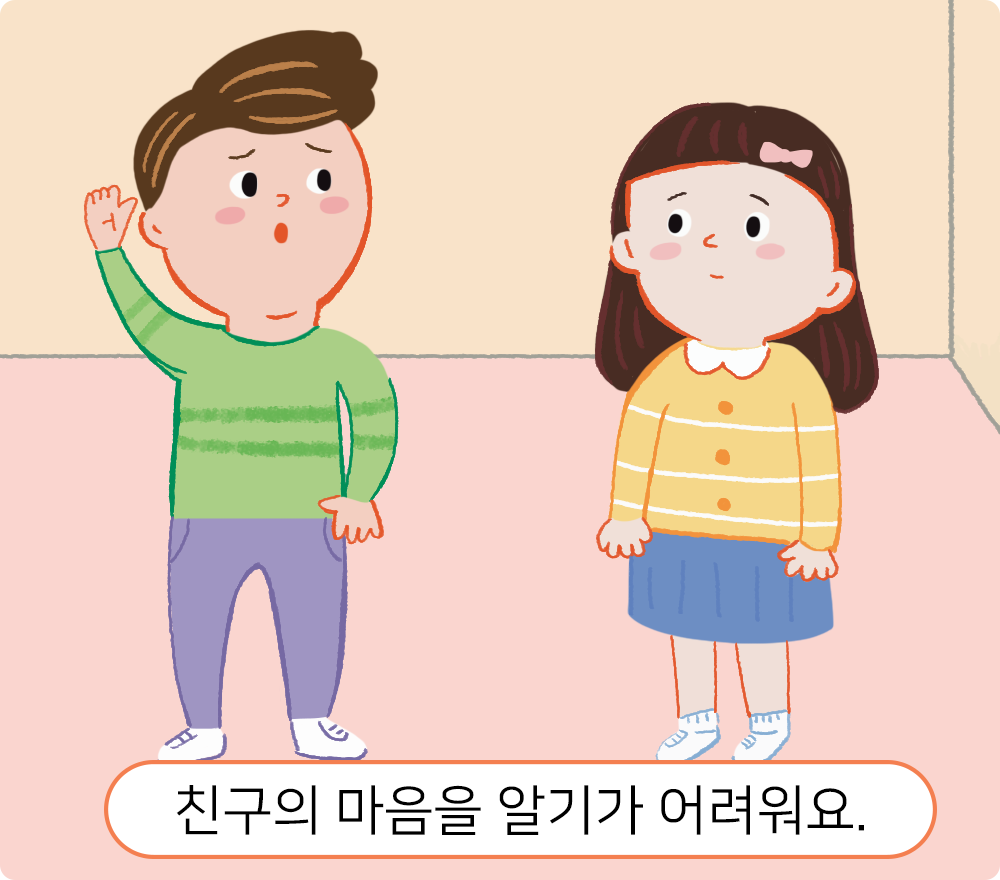
<style>
.page{position:relative;width:1000px;height:880px;background:#fad5cf}
.page>*{position:absolute;margin:0}
.t1{font:54.2px "NanumSquareR";color:#000000}
</style>
<div class="page">
<p class="t1" style="left:176px;top:785px;width:688px;height:50px">친구의 마음을 알기가 어려워요.</p>
</div>
